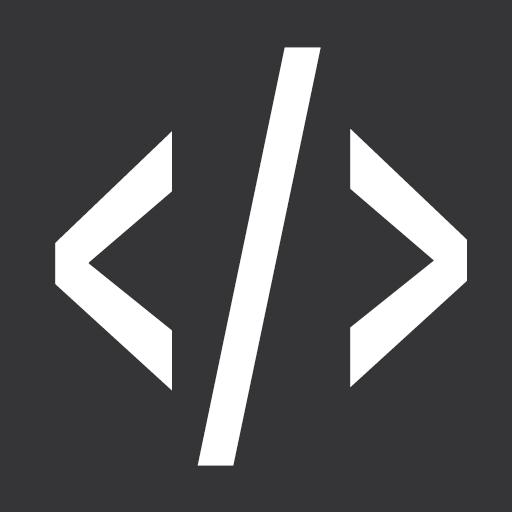
<style>
.page{position:relative;width:512px;height:512px;background:#353537}
.page>*{position:absolute;margin:0}
.t1{font:512px "SegoeUI-Bold";color:#ffffff;scale:0.5 1}
</style>
<div class="page">
<p class="t1" style="left:55px;top:47px;width:412px;height:419px">&lt;/&gt;</p>
</div>
